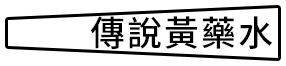
<style>
.page{position:relative;width:286px;height:66px;background:#ffffff}
.page>*{position:absolute;margin:0}
.t1{font:35px "NotoSansCJKtc-Medium";letter-spacing:0.06em;color:#000000}
</style>
<div class="page">
<p class="t1" style="left:90px;top:16px;width:183px;height:33px">傳說黃藥水</p>
</div>
